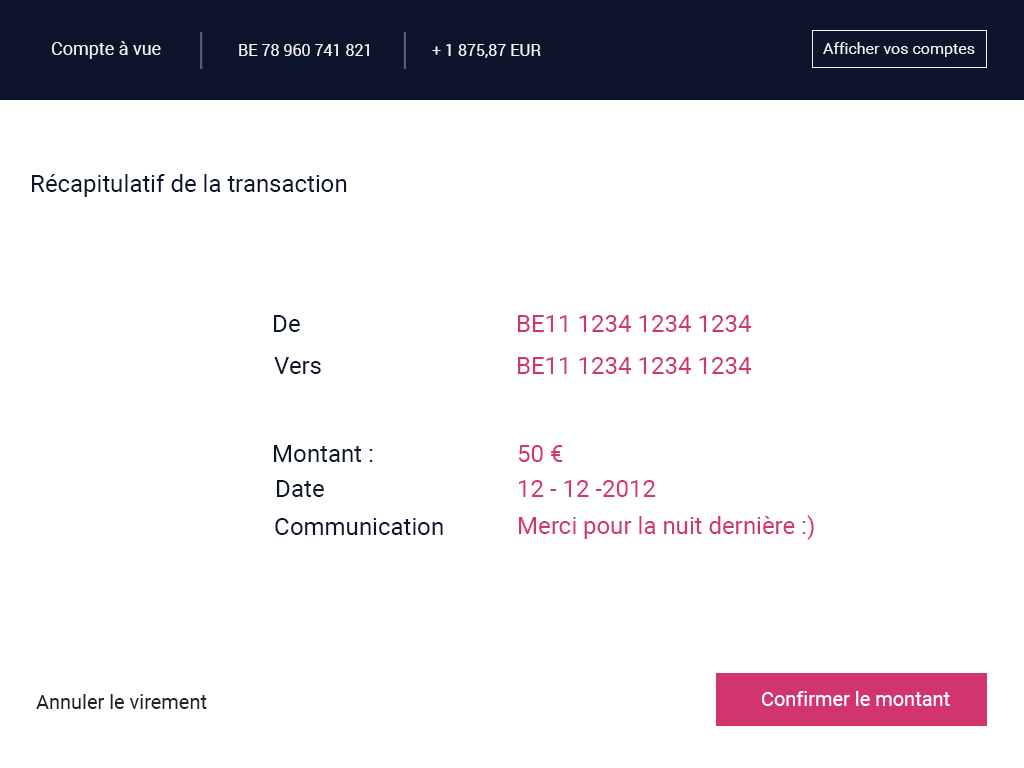
<style>
.page{position:relative;width:1024px;height:768px;background:#ffffff}
.page>*{position:absolute;margin:0}
.t1{font:18px "Roboto-Regular";color:#f5f5f5}
.t2{font:16px "Roboto-Regular";color:#f5f5f5}
.t3{font:24px "Roboto-Regular";color:#0d152d}
.t4{font:24px "Roboto-Regular";color:#d1346e}
.t5{font:20px "Roboto-Regular";color:#222222}
.t6{font:20px "Roboto-Regular";color:#ffffff}
</style>
<div class="page">
<p class="t1" style="left:51px;top:41px;width:110px;height:18px">Compte à vue</p>
<p class="t2" style="left:239px;top:44px;width:130px;height:12px">BE 78 960 741 821</p>
<p class="t2" style="left:432px;top:44px;width:109px;height:14px">+ 1 875,87 EUR</p>
<p class="t2" style="left:823px;top:42px;width:152px;height:15px">Afficher vos comptes</p>
<p class="t3" style="left:32px;top:174px;width:315px;height:23px">Récapitulatif de la transaction</p>
<p class="t3" style="left:274px;top:315px;width:26px;height:17px">De</p>
<p class="t4" style="left:518px;top:315px;width:233px;height:17px">BE11 1234 1234 1234</p>
<p class="t3" style="left:274px;top:357px;width:47px;height:17px">Vers</p>
<p class="t4" style="left:518px;top:357px;width:233px;height:17px">BE11 1234 1234 1234</p>
<p class="t3" style="left:274px;top:445px;width:99px;height:17px">Montant :</p>
<p class="t4" style="left:518px;top:445px;width:45px;height:17px">50 €</p>
<p class="t3" style="left:277px;top:480px;width:47px;height:17px">Date</p>
<p class="t4" style="left:519px;top:480px;width:137px;height:17px">12 - 12 -2012</p>
<p class="t3" style="left:275px;top:518px;width:168px;height:17px">Communication</p>
<p class="t4" style="left:519px;top:515px;width:295px;height:25px">Merci pour la nuit dernière :)</p>
<p class="t5" style="left:36px;top:694px;width:171px;height:15px">Annuler le virement</p>
<p class="t6" style="left:762px;top:691px;width:188px;height:15px">Confirmer le montant</p>
</div>
